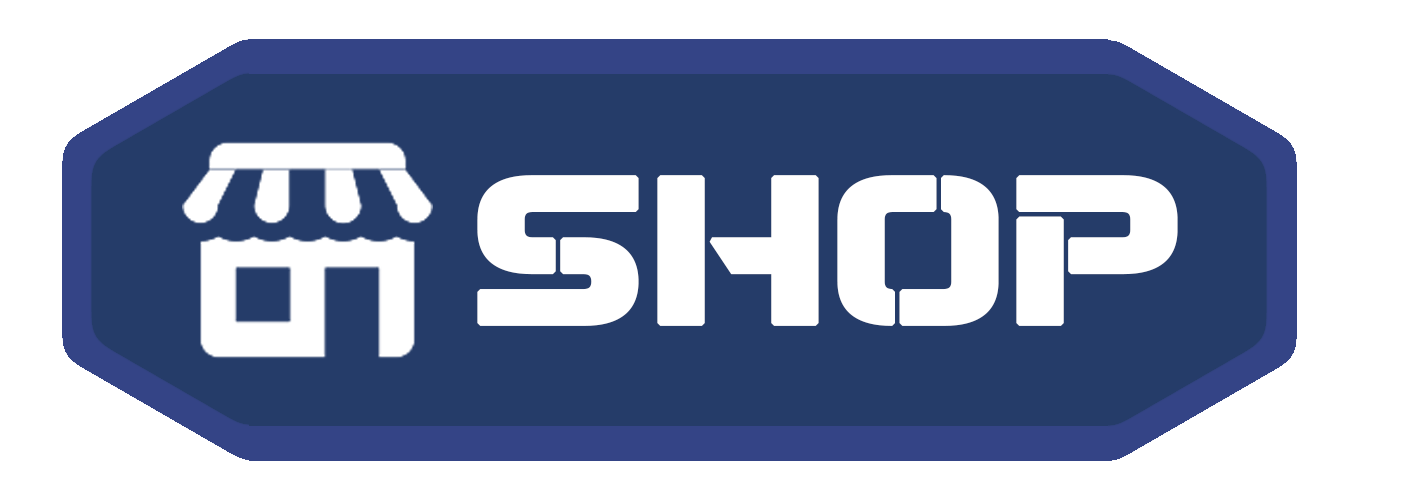
<style>
.page{position:relative;width:1410px;height:500px;background:#ffffff}
.page>*{position:absolute;margin:0}
.t1{font:212px "Revamped";letter-spacing:-0.01em;color:#ffffff;font-weight:bold}
</style>
<div class="page">
<p class="t1" style="left:477px;top:175px;width:701px;height:151px">shop</p>
</div>
